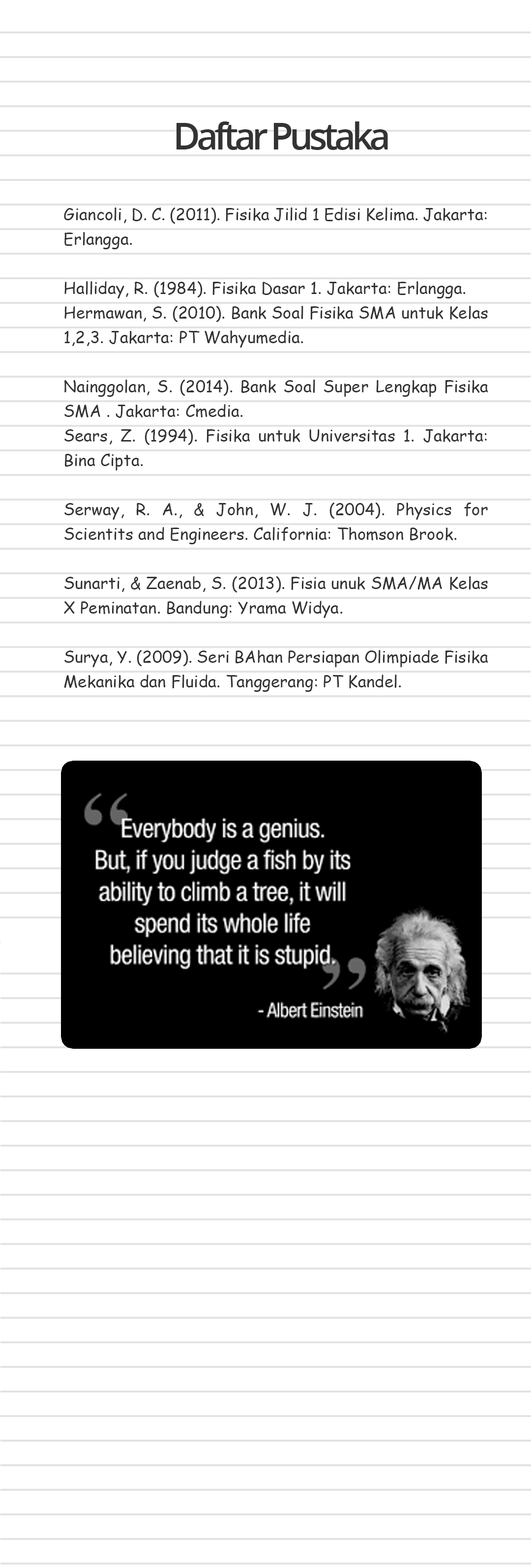
<style>
.page{position:relative;width:531px;height:1568px;background:#ffffff}
.page>*{position:absolute;margin:0}
.t1{font:36.9px "OpenSans-SemiBold";letter-spacing:-0.1em;color:#333333}
.t2{font:16.4px/24.6px "ComicSansMS";color:#333333}
</style>
<div class="page">
<p class="t1" style="left:177px;top:121px;width:211px;height:29px">Daftar Pustaka</p>
<p class="t2" style="left:64px;top:207px;width:424px;height:485px;text-align:justify">Giancoli, D. C. (2011). Fisika Jilid 1 Edisi Kelima. Jakarta: Erlangga.<br><br>Halliday, R. (1984). Fisika Dasar 1. Jakarta: Erlangga.<br>Hermawan, S. (2010). Bank Soal Fisika SMA untuk Kelas 1,2,3. Jakarta: PT Wahyumedia.<br><br>Nainggolan, S. (2014). Bank Soal Super Lengkap Fisika SMA . Jakarta: Cmedia.<br>Sears, Z. (1994). Fisika untuk Universitas 1. Jakarta: Bina Cipta.<br><br>Serway, R. A., &amp; John, W. J. (2004). Physics for Scientits and Engineers. California: Thomson Brook.<br><br>Sunarti, &amp; Zaenab, S. (2013). Fisia unuk SMA/MA Kelas X Peminatan. Bandung: Yrama Widya.<br><br>Surya, Y. (2009). Seri BAhan Persiapan Olimpiade Fisika Mekanika dan Fluida. Tanggerang: PT Kandel.</p>
</div>
